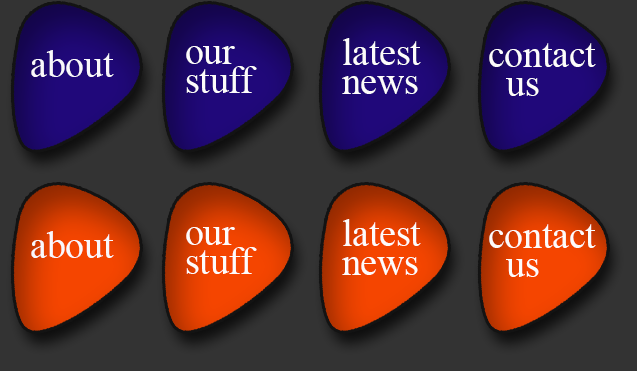
<style>
.page{position:relative;width:637px;height:371px;background:#333333}
.page>*{position:absolute;margin:0}
.t1{font:37.5px/29.2px "TimesNewRomanPSMT";color:#fdfcfb}
.t2{font:37.5px "TimesNewRomanPSMT";color:#f9f8fb}
</style>
<div class="page">
<p class="t1" style="left:342px;top:38px;width:79px;height:56px">latest<br>news</p>
<p class="t2" style="left:31px;top:50px;width:83px;height:27px">about</p>
<p class="t1" style="left:186px;top:46px;width:71px;height:47px">our<br>stuff</p>
<p class="t1" style="left:489px;top:43px;width:107px;height:53px">contact<br>  us</p>
<p class="t1" style="left:342px;top:219px;width:79px;height:56px">latest<br>news</p>
<p class="t2" style="left:31px;top:231px;width:83px;height:27px">about</p>
<p class="t1" style="left:186px;top:227px;width:71px;height:47px">our<br>stuff</p>
<p class="t1" style="left:489px;top:224px;width:107px;height:53px">contact<br>  us</p>
</div>
